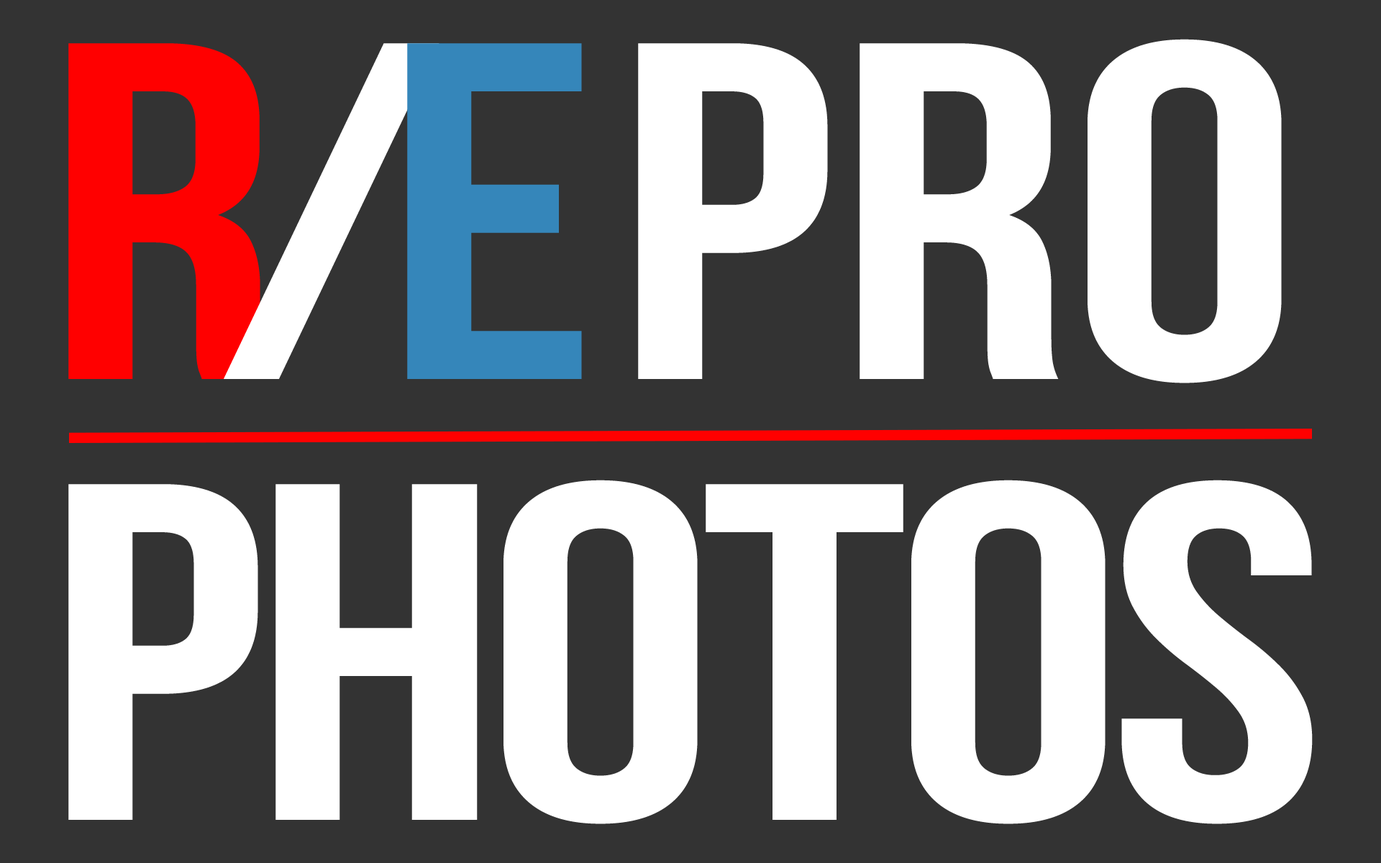
<style>
.page{position:relative;width:1381px;height:863px;background:#333333}
.page>*{position:absolute;margin:0}
.t1{font:479.6px/440.9px "BebasNeueBold";letter-spacing:-0.025em;color:#ffffff;scale:1.21 1}
.t2{font:479.6px/440.9px "BebasNeueBold";letter-spacing:-0.1em;color:#ff0000;scale:1.21 1}
.t3{font:479.6px/440.9px "BebasNeueBold";letter-spacing:-0.1em;color:#ffffff;scale:1.21 1}
.t4{font:479.6px/440.9px "BebasNeueBold";letter-spacing:-0.1em;color:#3586ba;scale:1.21 1}
.t5{font:479.6px/440.9px "BebasNeueBold";color:#ffffff;scale:1.21 1}
</style>
<div class="page">
<p class="t1" style="left:68px;top:39px;width:1245px;height:785px"><span class="t2">R</span><span class="t3">/</span><span class="t4">E </span><span class="t5">Pro<br></span>Photos</p>
</div>
